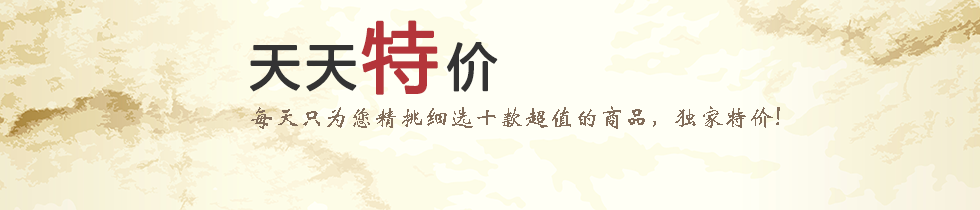
<style>
.page{position:relative;width:980px;height:210px;background:#fffff5}
.page>*{position:absolute;margin:0}
.t1{font:50px "MicrosoftYaHei";letter-spacing:0.1em;color:#333333;font-weight:bold}
.t2{font:75px "MicrosoftYaHei";letter-spacing:0.1em;color:#b4353a;font-weight:bold}
.t3{font:25px "STXinwei";color:#826d5a}
</style>
<div class="page">
<p class="t1" style="left:250px;top:20px;width:248px;height:75px">天天<span class="t2">特</span>价</p>
<p class="t3" style="left:251px;top:106px;width:529px;height:23px">每天只为您精挑细选十款超值的商品，独家特价!</p>
</div>
